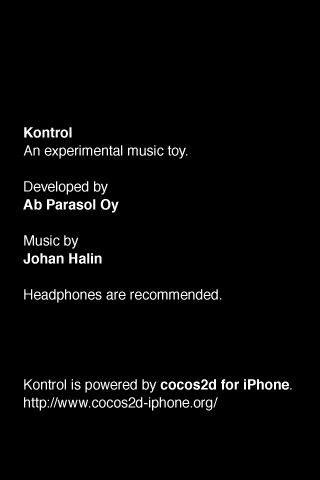
<style>
.page{position:relative;width:320px;height:480px;background:#000000}
.page>*{position:absolute;margin:0}
.t1{font:14px/18px "Helvetica";color:#ffffff}
.t2{font:14px/18px "Helvetica-Bold";color:#ffffff}
</style>
<div class="page">
<p class="t1" style="left:23px;top:127px;width:269px;height:284px"><span class="t2">Kontrol<br></span>An experimental music toy.<br><br>Developed by<br><span class="t2">Ab Parasol Oy<br></span><br>Music by<br><span class="t2">Johan Halin<br></span><br>Headphones are recommended.<br><br><br><br><br>Kontrol is powered by <span class="t2">cocos2d for iPhone</span>.<br>http://www.cocos2d-iphone.org/</p>
</div>
